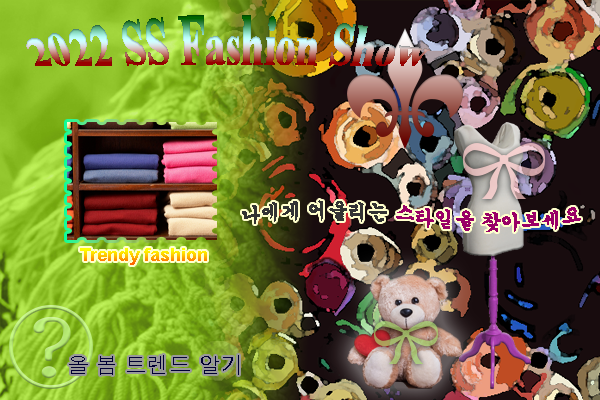
<style>
.page{position:relative;width:600px;height:400px}
.page>*{position:absolute;margin:0}
.t1{font:40px "TimesNewRomanPS-BoldMT"}
.t2{font:20px "Gungsuh";color:#990066}
.t3{font:20px "Gungsuh";color:#333333}
.t4{font:18px "Arial-BoldMT"}
.t5{font:22px "Dotum";color:#000033}
</style>
<div class="page">
<p class="t1" style="left:26px;top:15px;width:404px;height:51px">2022 SS Fashion Show</p>
<p class="t2" style="left:242px;top:200px;width:339px;height:32px"><span class="t3">나에게 어울리는 </span>스타일을 찾아보세요</p>
<p class="t4" style="left:80px;top:248px;width:127px;height:17px">Trendy fashion</p>
<p class="t5" style="left:69px;top:355px;width:170px;height:20px">올 봄 트렌드 알기</p>
</div>
